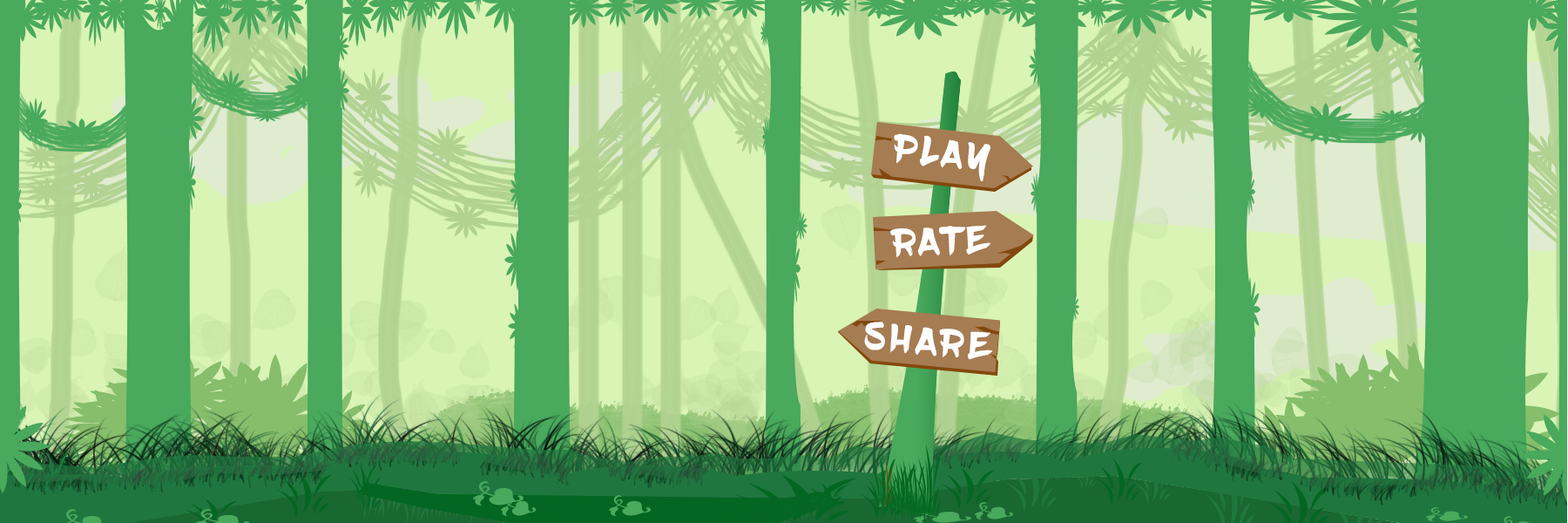
<style>
.page{position:relative;width:1568px;height:523px;background:#49a95d}
.page>*{position:absolute;margin:0}
.t1{font:39.6px "BlowBrush";letter-spacing:0.15em;color:#fefefe;scale:1.04 1}
</style>
<div class="page">
<p class="t1" style="left:894px;top:133px;width:96px;height:48px;rotate:6deg">PLAY</p>
<p class="t1" style="left:890px;top:225px;width:101px;height:33px;rotate:-2deg">RATE</p>
<p class="t1" style="left:864px;top:321px;width:129px;height:39px;rotate:5deg">SHARE</p>
</div>
